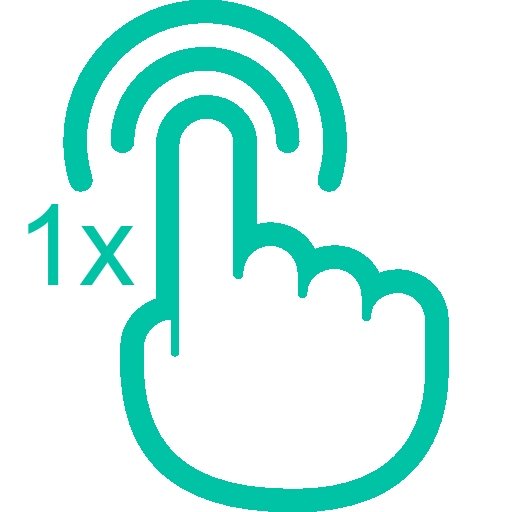
<style>
.page{position:relative;width:512px;height:512px;background:#ffffff}
.page>*{position:absolute;margin:0}
.t1{font:113.3px "ArialMT";color:#00c2a5}
</style>
<div class="page">
<p class="t1" style="left:28px;top:204px;width:107px;height:81px">1x</p>
</div>
